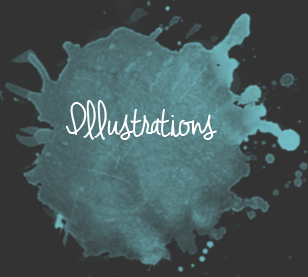
<style>
.page{position:relative;width:308px;height:277px;background:#333333}
.page>*{position:absolute;margin:0}
.t1{font:48px "JenniferLynne-Bold";color:#ffffff}
</style>
<div class="page">
<p class="t1" style="left:65px;top:100px;width:152px;height:40px">Illustrations</p>
</div>
